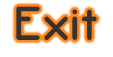
<style>
.page{position:relative;width:113px;height:57px;background:#ffffff}
.page>*{position:absolute;margin:0}
.t1{font:48px "Neon80s";color:#343232}
</style>
<div class="page">
<p class="t1" style="left:16px;top:6px;width:81px;height:34px">Exit</p>
</div>
